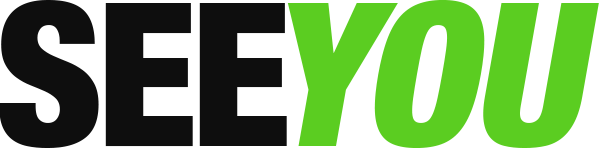
<style>
.page{position:relative;width:600px;height:148px;background:#0e0e0e}
.page>*{position:absolute;margin:0}
.t1{font:200px "HelveticaNeue-CondensedBlack";letter-spacing:-0.03em;color:#0e0e0e}
.t2{font:200px "HelveticaNeue-CondensedBlack";letter-spacing:-0.03em;color:#5bce21;font-style:italic}
</style>
<div class="page">
<p class="t1" style="left:0px;top:0px;width:599px;height:148px">SEE<span class="t2">YOU</span></p>
</div>
